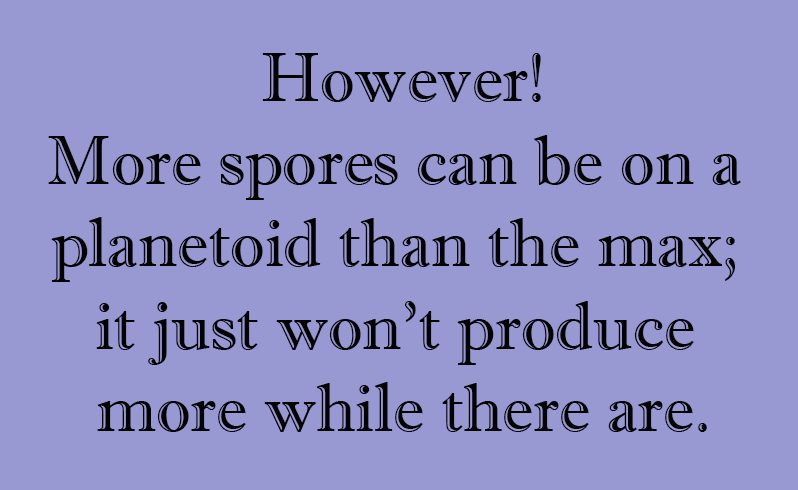
<style>
.page{position:relative;width:798px;height:490px;background:#9898d3}
.page>*{position:absolute;margin:0}
.t1{font:68.7px "ImprintMT-Shadow";color:#030303}
</style>
<div class="page">
<p class="t1" style="left:48px;top:53px;width:693px;height:379px;text-align:center">However!<br>More spores can be on a <br>planetoid than the max; <br>it just won’t produce <br>more while there are.</p>
</div>
